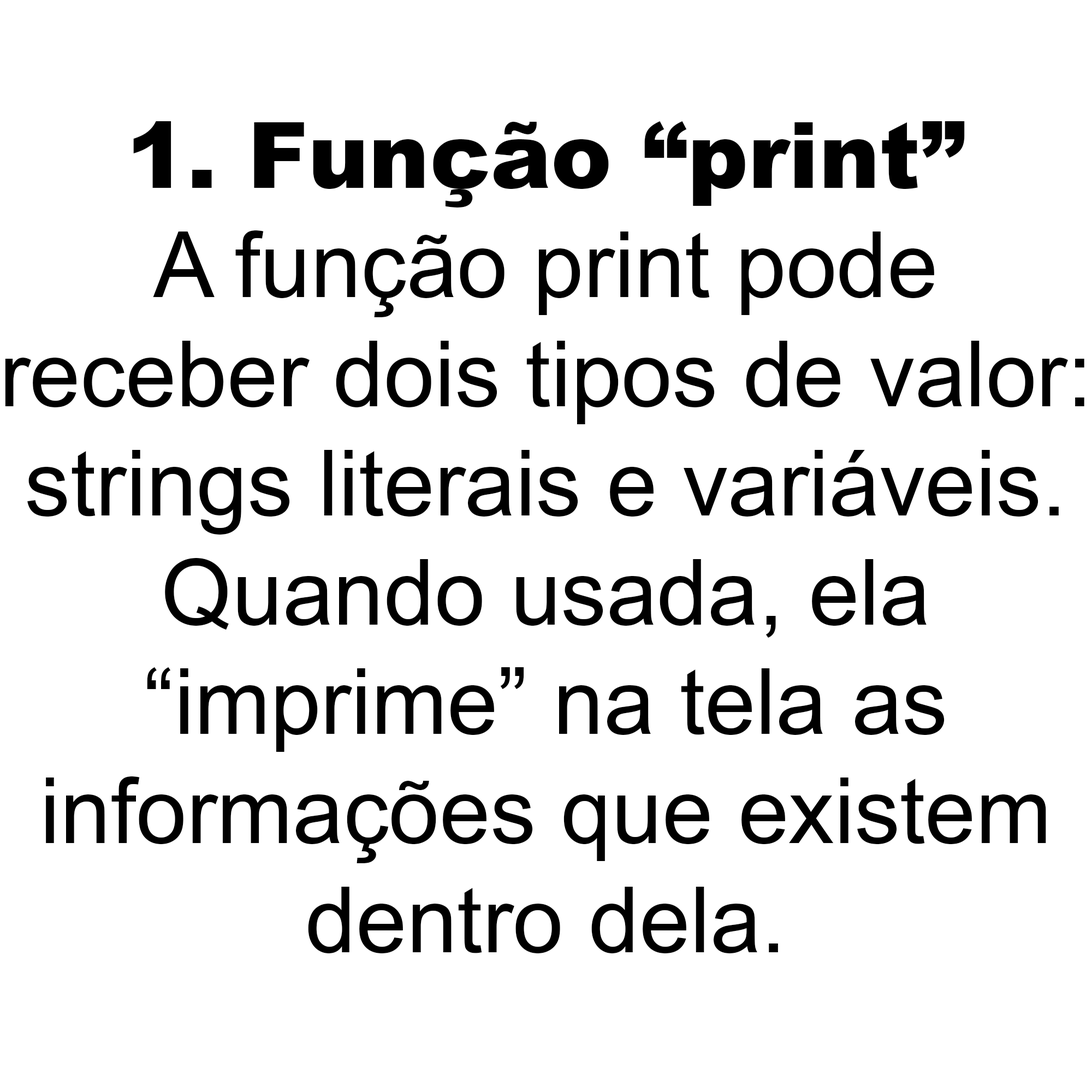
<style>
.page{position:relative;width:1092px;height:1092px;background:#ffffff}
.page>*{position:absolute;margin:0}
.t1{font:91px "ArialMT";color:#000000}
.t2{font:91px "Arial-Black";color:#000000}
</style>
<div class="page">
<p class="t1" style="left:5px;top:121px;width:1079px;height:832px;text-align:center"><span class="t2">1. Função “print”<br></span>A função print pode<br>receber dois tipos de valor:<br>strings literais e variáveis.<br>Quando usada, ela<br>“imprime” na tela as<br>informações que existem<br>dentro dela.</p>
</div>
